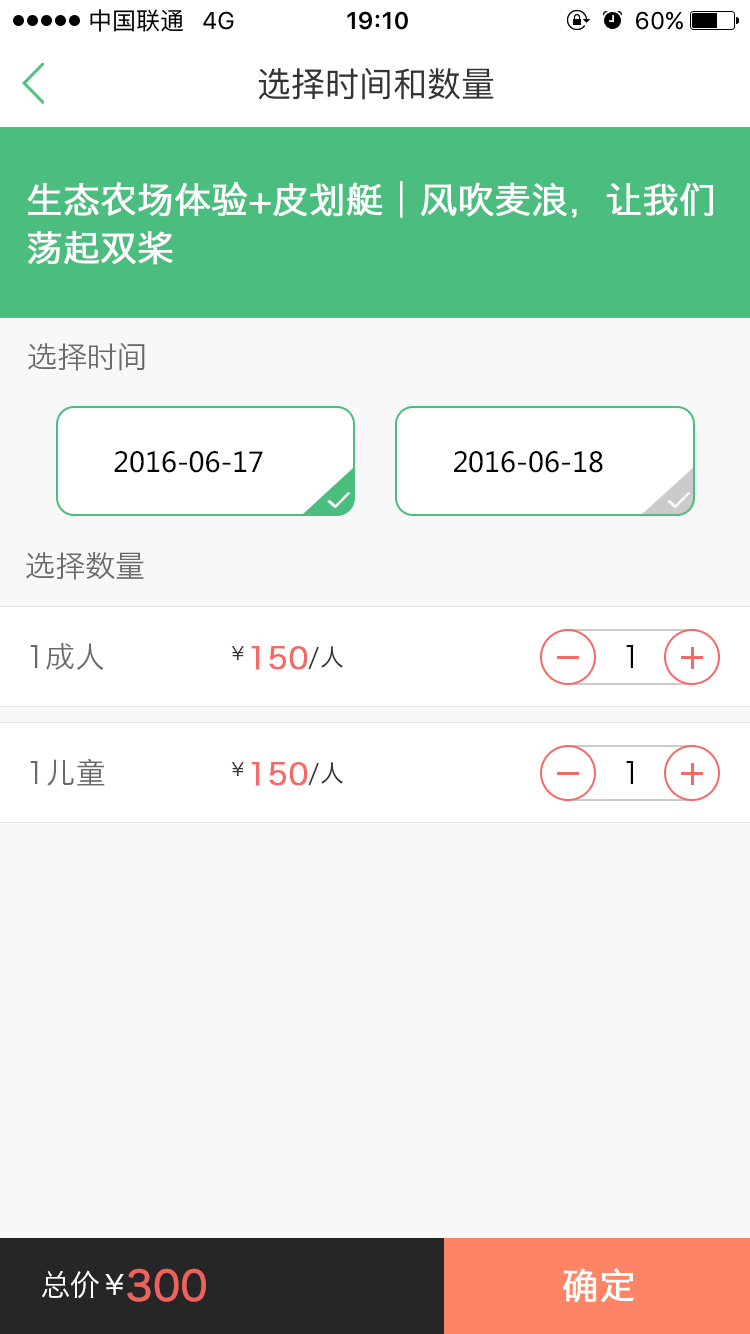
<style>
.page{position:relative;width:750px;height:1334px;background:#f8f8f8}
.page>*{position:absolute;margin:0}
.t1{font:36px/48px "HiraginoSansGB-W3";color:#ffffff;font-weight:bold}
.t2{font:30px "HiraginoSansGB-W3";color:#6a6a6a}
.t3{font:27.2px "MicrosoftYaHei";color:#000000}
.t4{font:20px "CTCuYuanSF";color:#f8f8f8;font-weight:bold;scale:1.29 1}
.t5{font:30px "HiraginoSansGB-W3";color:#f76968;font-weight:bold}
.t6{font:18px "HiraginoSansGB-W3";color:#343434}
.t7{font:24px "HiraginoSansGB-W3";color:#343434}
.t8{font:30px "HiraginoSansGB-W3";color:#000000}
.t9{font:30px "HiraginoSansGB-W3";color:#ffffff}
.t10{font:40px "HiraginoSansGB-W3";color:#ec625f;font-weight:bold}
.t11{font:27.2px "HiraginoSansGB-W3";letter-spacing:-0.075em;color:#ffffff}
.t12{font:36px "HiraginoSansGB-W3";color:#ffffff;font-weight:bold}
</style>
<div class="page">
<p class="t1" style="left:27px;top:181px;width:687px;height:84px">生态农场体验+皮划艇︱风吹麦浪，让我们<br>荡起双桨</p>
<p class="t2" style="left:28px;top:342px;width:117px;height:29px">选择时间</p>
<p class="t3" style="left:114px;top:451px;width:149px;height:22px">2016-06-17</p>
<p class="t3" style="left:454px;top:451px;width:149px;height:22px">2016-06-18</p>
<p class="t4" style="left:327px;top:492px;width:24px;height:16px">√</p>
<p class="t4" style="left:667px;top:492px;width:24px;height:16px">√</p>
<p class="t2" style="left:26px;top:552px;width:118px;height:28px">选择数量</p>
<p class="t2" style="left:30px;top:643px;width:74px;height:27px">1成人</p>
<p class="t5" style="left:231px;top:646px;width:112px;height:24px"><span class="t6">￥</span>150<span class="t7">/人</span></p>
<p class="t8" style="left:626px;top:645px;width:8px;height:23px">1</p>
<p class="t2" style="left:30px;top:758px;width:75px;height:28px">1儿童</p>
<p class="t8" style="left:626px;top:761px;width:8px;height:23px">1</p>
<p class="t5" style="left:231px;top:762px;width:112px;height:24px"><span class="t6">￥</span>150<span class="t7">/人</span></p>
<p class="t9" style="left:42px;top:1270px;width:57px;height:29px">总价</p>
<p class="t10" style="left:105px;top:1268px;width:101px;height:34px"><span class="t11">￥</span>300</p>
<p class="t12" style="left:562px;top:1268px;width:72px;height:35px">确定</p>
</div>
